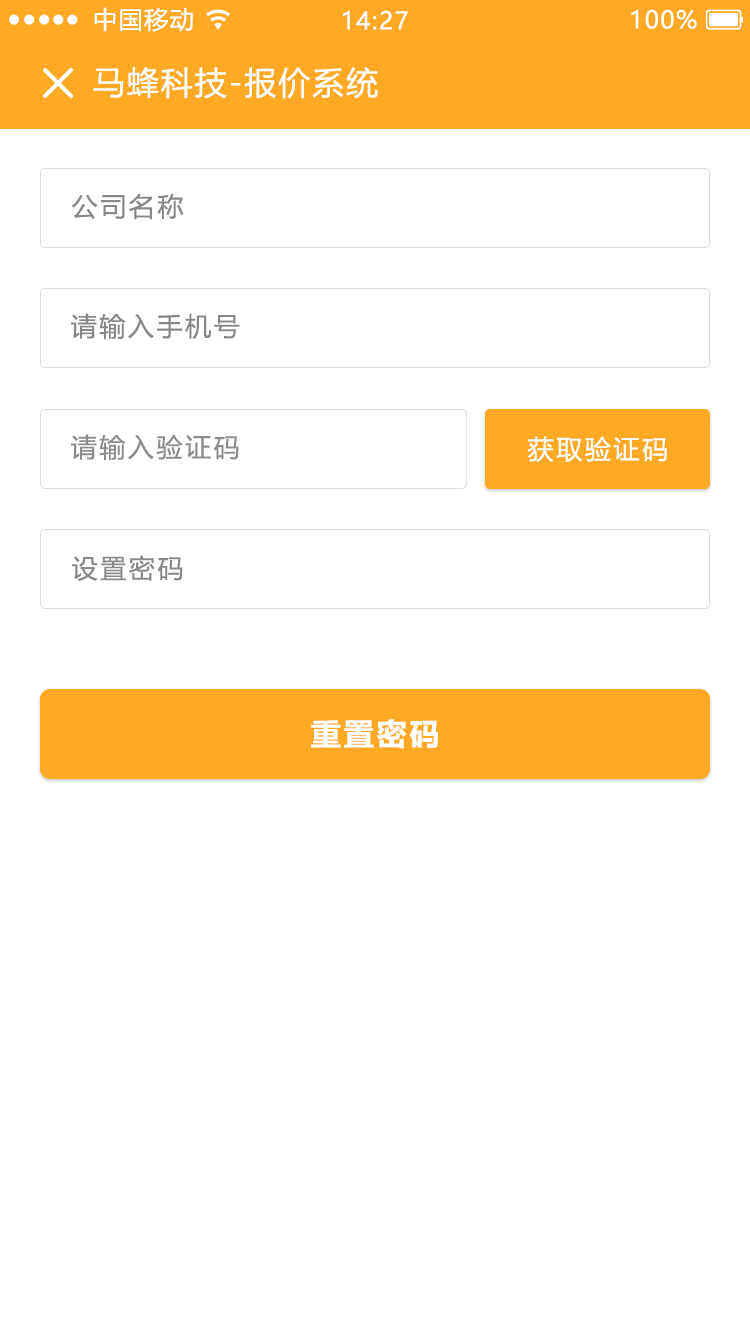
<style>
.page{position:relative;width:750px;height:1334px;background:#ffffff}
.page>*{position:absolute;margin:0}
.t1{font:24px "MicrosoftYaHeiUI";letter-spacing:0.06em;color:#ffffff}
.t2{font:32px "MicrosoftYaHeiUI";letter-spacing:0.06em;color:#ffffff}
.t3{font:26px "MicrosoftYaHeiUI";letter-spacing:0.1em;color:#888888}
.t4{font:26px "MicrosoftYaHeiUI";letter-spacing:0.1em;color:#8c8c8c}
.t5{font:26px "MicrosoftYaHeiUI";letter-spacing:0.1em;color:#ffffff}
.t6{font:30px "MicrosoftYaHeiUI-Bold";letter-spacing:0.1em;color:#ffffff}
</style>
<div class="page">
<p class="t1" style="left:94px;top:7px;width:99px;height:25px">中国移动</p>
<p class="t1" style="left:343px;top:10px;width:65px;height:20px">14:27</p>
<p class="t1" style="left:631px;top:9px;width:66px;height:20px">100%</p>
<p class="t2" style="left:93px;top:66px;width:285px;height:33px">马蜂科技-报价系统</p>
<p class="t3" style="left:71px;top:193px;width:113px;height:27px">公司名称</p>
<p class="t3" style="left:71px;top:313px;width:169px;height:27px">请输入手机号</p>
<p class="t4" style="left:71px;top:434px;width:168px;height:26px">请输入验证码</p>
<p class="t5" style="left:527px;top:436px;width:140px;height:26px">获取验证码</p>
<p class="t3" style="left:72px;top:555px;width:111px;height:26px">设置密码</p>
<p class="t6" style="left:311px;top:719px;width:127px;height:30px">重置密码</p>
</div>
